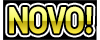
<style>
.page{position:relative;width:100px;height:40px;background:#000000}
.page>*{position:absolute;margin:0}
.t1{font:37.4px "Barlow-Bold";letter-spacing:-0.05em;scale:0.89 1}
</style>
<div class="page">
<p class="t1" style="left:9px;top:6px;width:83px;height:28px">NOVO!</p>
</div>
